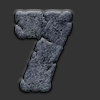
<style>
.page{position:relative;width:100px;height:100px;background:#333333}
.page>*{position:absolute;margin:0}
.t1{font:100px "JFRockSolid"}
</style>
<div class="page">
<p class="t1" style="left:15px;top:11px;width:57px;height:81px">7</p>
</div>
